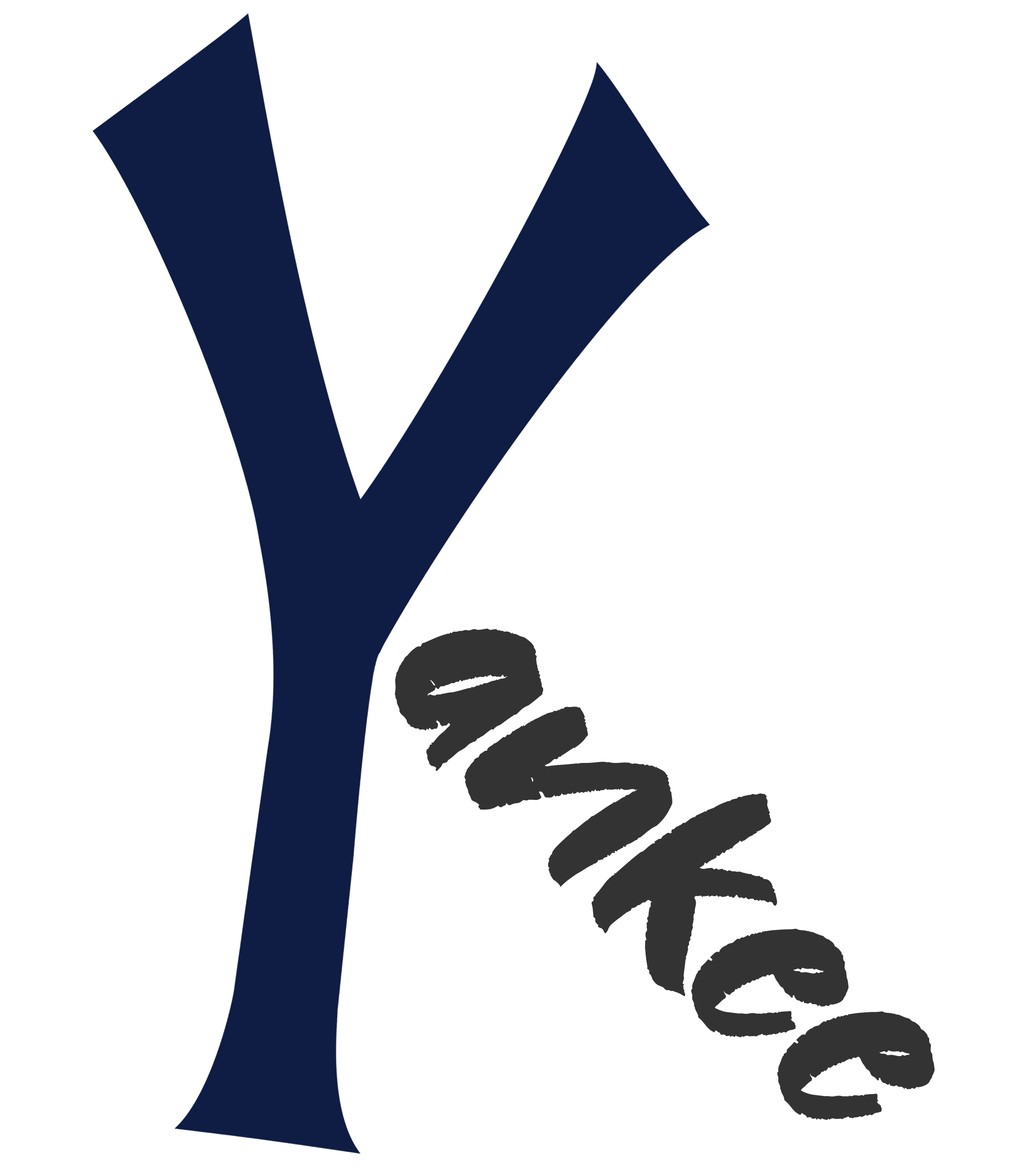
<style>
.page{position:relative;width:1021px;height:1167px;background:#ffffff}
.page>*{position:absolute;margin:0}
.t1{font:291.5px "Fonters";color:#333333}
</style>
<div class="page">
<p class="t1" style="left:395px;top:628px;width:540px;height:493px;rotate:44deg">ankee</p>
</div>
